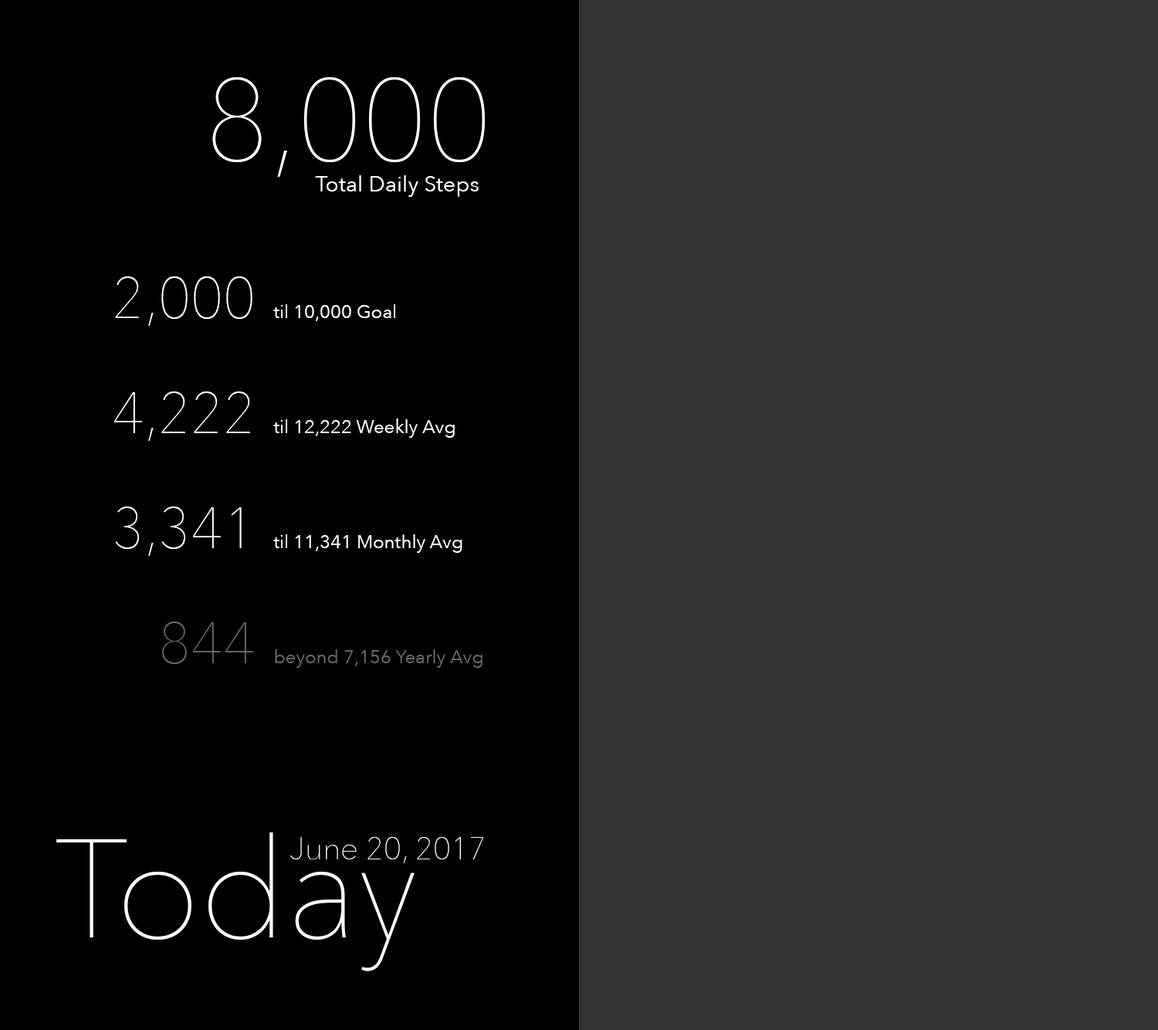
<style>
.page{position:relative;width:1158px;height:1030px;background:#333333}
.page>*{position:absolute;margin:0}
.t1{font:115.8px "AvenirNext-UltraLight";color:#ffffff}
.t2{font:21.9px "AvenirNext-Regular";color:#ffffff}
.t3{font:57.9px "AvenirNext-UltraLight";color:#ffffff}
.t4{font:18.5px "AvenirNext-Regular";color:#ffffff}
.t5{font:57.9px "AvenirNext-UltraLight";color:#666666}
.t6{font:18.5px "AvenirNext-Regular";color:#666666}
.t7{font:139px "AvenirNext-UltraLight";color:#ffffff}
.t8{font:31.5px "AvenirNext-UltraLight";color:#fbfbfb}
</style>
<div class="page">
<p class="t1" style="left:212px;top:77px;width:273px;height:100px">8,000</p>
<p class="t2" style="left:315px;top:175px;width:164px;height:22px">Total Daily Steps</p>
<p class="t3" style="left:115px;top:276px;width:137px;height:50px">2,000</p>
<p class="t4" style="left:273px;top:304px;width:122px;height:17px">til 10,000 Goal</p>
<p class="t3" style="left:114px;top:391px;width:136px;height:50px">4,222</p>
<p class="t4" style="left:273px;top:418px;width:182px;height:20px">til 12,222 Weekly Avg</p>
<p class="t3" style="left:115px;top:506px;width:127px;height:50px">3,341</p>
<p class="t4" style="left:273px;top:534px;width:189px;height:19px">til 11,341 Monthly Avg</p>
<p class="t5" style="left:162px;top:621px;width:91px;height:43px">844</p>
<p class="t6" style="left:275px;top:649px;width:207px;height:19px">beyond 7,156 Yearly Avg</p>
<p class="t7" style="left:56px;top:832px;width:359px;height:139px">Today</p>
<p class="t8" style="left:290px;top:837px;width:193px;height:26px">June 20, 2017</p>
</div>
